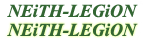
<style>
.page{position:relative;width:143px;height:40px;background:#ffffff}
.page>*{position:absolute;margin:0}
.t1{font:18px "TimesNewRomanPS-BoldItalicMT";color:#336633}
</style>
<div class="page">
<p class="t1" style="left:7px;top:4px;width:131px;height:14px">NEiTH-LEGiON</p>
<p class="t1" style="left:7px;top:23px;width:131px;height:14px">NEiTH-LEGiON</p>
</div>
